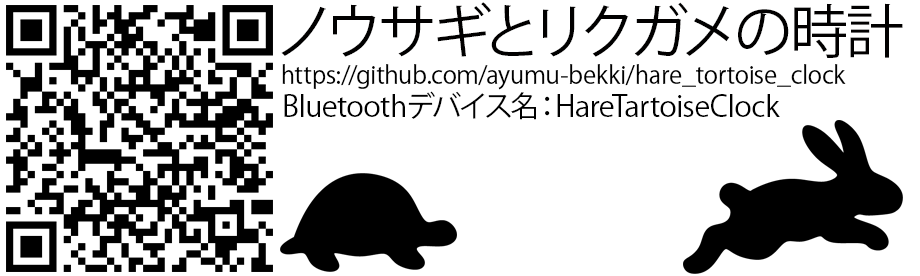
<style>
.page{position:relative;width:920px;height:276px;background:#ffffff}
.page>*{position:absolute;margin:0}
.t1{font:58.3px "KozGoPr6N-Regular";color:#010000}
.t2{font:24.3px "KozGoPr6N-Regular";color:#000000}
.t3{font:29.2px "KozGoPr6N-Regular";color:#000000}
</style>
<div class="page">
<p class="t1" style="left:281px;top:2px;width:622px;height:56px">ノウサギとリクガメの時計</p>
<p class="t2" style="left:282px;top:64px;width:564px;height:26px">https://github.com/ayumu-bekki/hare_tortoise_clock</p>
<p class="t3" style="left:284px;top:91px;width:496px;height:29px">Bluetoothデバイス名：HareTartoiseClock</p>
</div>
